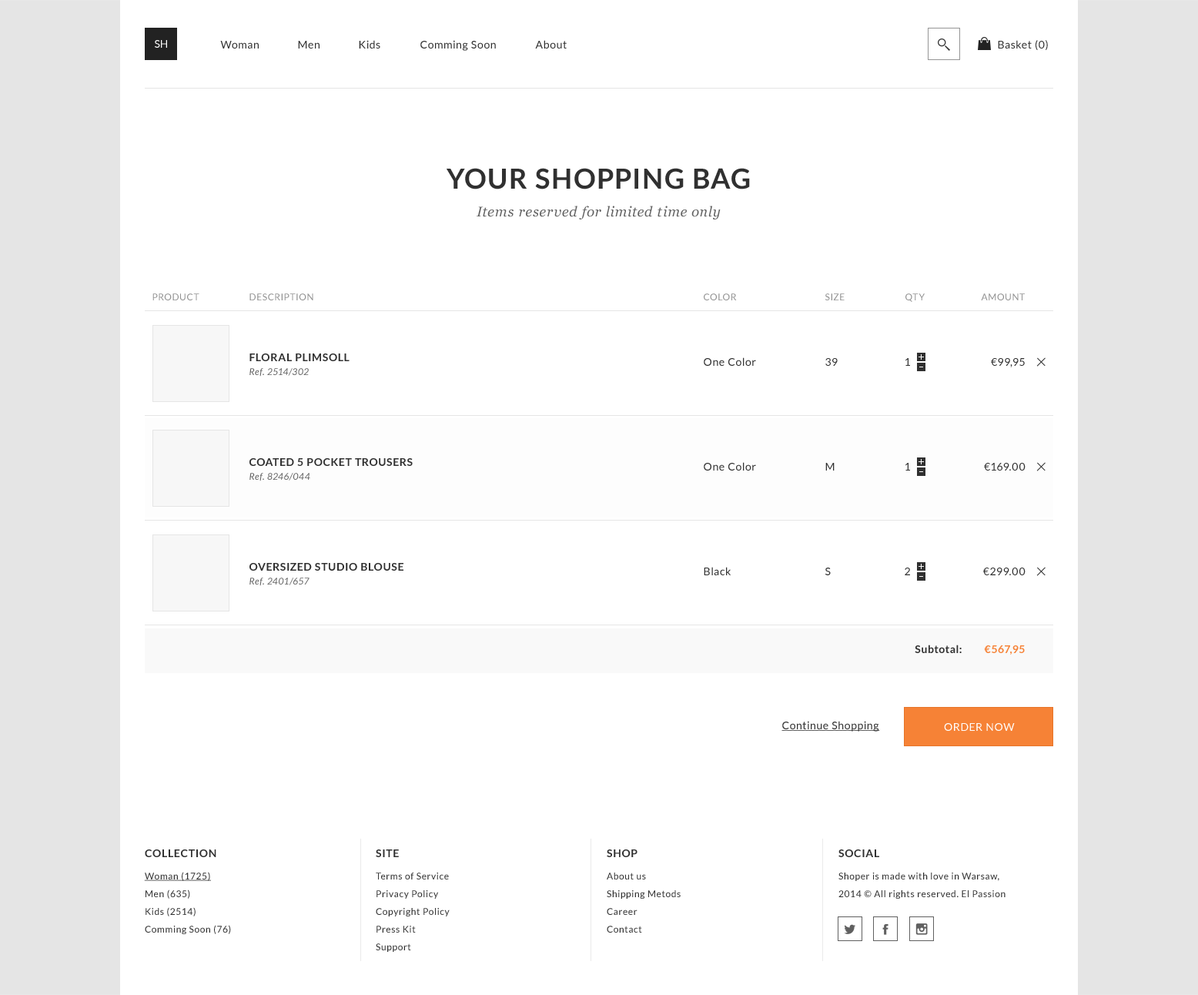
<style>
.page{position:relative;width:1198px;height:995px;background:#ffffff}
.page>*{position:absolute;margin:0}
.t1{font:10.8px "Lato-Regular";color:#ffffff;text-transform:uppercase}
.t2{font:10.8px "Lato-Regular";letter-spacing:0.05em;color:#303030}
.t3{font:13.9px/27.7px "Georgia-Italic";letter-spacing:0.05em;color:#606060}
.t4{font:27.7px/27.7px "Lato-Bold";letter-spacing:0.05em;color:#303030;text-transform:uppercase}
.t5{font:9.2px "Lato-Regular";letter-spacing:0.05em;color:#909090;text-transform:uppercase}
.t6{font:10.8px/13.9px "Lato-Bold";letter-spacing:0.05em;color:#303030;text-transform:uppercase}
.t7{font:9.2px/13.9px "Lato-Italic";letter-spacing:0.05em;color:#606060}
.t8{font:10.8px "Lato-Regular";letter-spacing:0.05em;color:#303030;text-transform:uppercase}
.t9{font:23.1px "Lato-Light";letter-spacing:0.05em;color:#303030;text-transform:uppercase}
.t10{font:10.8px "Lato-Bold";letter-spacing:0.05em;color:#303030}
.t11{font:10.8px "Lato-Bold";letter-spacing:0.05em;color:#f68236}
.t12{font:10.8px "Lato-Regular";letter-spacing:0.05em;color:#303030;text-decoration:underline}
.t13{font:10.8px "Lato-Regular";letter-spacing:0.05em;color:#ffffff;text-transform:uppercase}
.t14{font:10.8px "Lato-Bold";letter-spacing:0.05em;color:#303030;text-transform:uppercase}
.t15{font:9.2px/17.7px "Lato-Regular";letter-spacing:0.05em;color:#303030}
.t16{font:9.2px/17.7px "Lato-Regular";letter-spacing:0.05em;color:#303030;text-decoration:underline}
</style>
<div class="page">
<p class="t1" style="left:155px;top:40px;width:12px;height:8px">sh</p>
<p class="t2" style="left:220px;top:41px;width:39px;height:8px">Woman</p>
<p class="t2" style="left:298px;top:41px;width:22px;height:8px">Men</p>
<p class="t2" style="left:359px;top:40px;width:21px;height:9px">Kids</p>
<p class="t2" style="left:421px;top:40px;width:75px;height:11px">Comming Soon</p>
<p class="t2" style="left:535px;top:40px;width:32px;height:9px">About</p>
<p class="t2" style="left:998px;top:40px;width:50px;height:10px">Basket (0)</p>
<p class="t3" style="left:447px;top:168px;width:303px;height:51px;text-align:center"><span class="t4">Your Shopping Bag<br></span>Items reserved for limited time only</p>
<p class="t5" style="left:152px;top:293px;width:47px;height:7px">PRODUCT</p>
<p class="t5" style="left:250px;top:293px;width:63px;height:7px">DESCRIPTION</p>
<p class="t5" style="left:704px;top:293px;width:33px;height:7px">color</p>
<p class="t5" style="left:826px;top:293px;width:19px;height:7px">SIZE</p>
<p class="t5" style="left:906px;top:293px;width:19px;height:9px">QTY</p>
<p class="t5" style="left:981px;top:293px;width:44px;height:7px">AMOUNT</p>
<p class="t6" style="left:250px;top:354px;width:100px;height:23px">FLORAL PLIMSOLL<br><span class="t7">Ref. 2514/302</span></p>
<p class="t2" style="left:704px;top:357px;width:52px;height:9px">One Color</p>
<p class="t8" style="left:826px;top:358px;width:12px;height:8px">39</p>
<p class="t8" style="left:906px;top:358px;width:4px;height:8px">1</p>
<p class="t8" style="left:991px;top:358px;width:34px;height:9px">€99,95</p>
<p class="t9" style="left:1037px;top:357px;width:9px;height:10px;rotate:45deg">+</p>
<p class="t6" style="left:250px;top:458px;width:163px;height:23px">COATED 5 POCKET TROUSERS<br><span class="t7">Ref. 8246/044</span></p>
<p class="t2" style="left:704px;top:462px;width:52px;height:9px">One Color</p>
<p class="t8" style="left:826px;top:463px;width:9px;height:8px">M</p>
<p class="t8" style="left:906px;top:463px;width:4px;height:8px">1</p>
<p class="t8" style="left:984px;top:463px;width:42px;height:8px">€169.00</p>
<p class="t9" style="left:1037px;top:462px;width:9px;height:9px;rotate:45deg">+</p>
<p class="t6" style="left:250px;top:563px;width:154px;height:23px">OVERSIZED STUDIO BLOUSE<br><span class="t7">Ref. 2401/657</span></p>
<p class="t2" style="left:704px;top:567px;width:27px;height:8px">Black</p>
<p class="t8" style="left:826px;top:568px;width:5px;height:7px">S</p>
<p class="t8" style="left:905px;top:568px;width:5px;height:7px">2</p>
<p class="t8" style="left:983px;top:568px;width:43px;height:7px">€299.00</p>
<p class="t9" style="left:1037px;top:567px;width:9px;height:9px;rotate:45deg">+</p>
<p class="t10" style="left:915px;top:645px;width:47px;height:8px">Subtotal:</p>
<p class="t11" style="left:984px;top:645px;width:41px;height:10px">€567,95</p>
<p class="t12" style="left:782px;top:721px;width:98px;height:11px">Continue Shopping</p>
<p class="t13" style="left:944px;top:723px;width:71px;height:8px">order now</p>
<p class="t14" style="left:145px;top:849px;width:71px;height:8px">Collection</p>
<p class="t14" style="left:376px;top:849px;width:23px;height:8px">site</p>
<p class="t14" style="left:607px;top:849px;width:31px;height:8px">Shop</p>
<p class="t14" style="left:839px;top:849px;width:41px;height:8px">social</p>
<p class="t15" style="left:144px;top:872px;width:87px;height:62px"><span class="t16">Woman (1725)<br></span>Men (635)<br>Kids (2514)<br>Comming Soon (76)</p>
<p class="t15" style="left:376px;top:873px;width:74px;height:79px">Terms of Service <br>Privacy Policy <br>Copyright Policy <br>Press Kit <br>Support</p>
<p class="t15" style="left:607px;top:873px;width:74px;height:60px">About us<br>Shipping Metods<br>Career<br>Contact</p>
<p class="t15" style="left:839px;top:873px;width:167px;height:26px">Shoper is made with love in Warsaw, <br>2014 © All rights reserved. El Passion</p>
</div>
